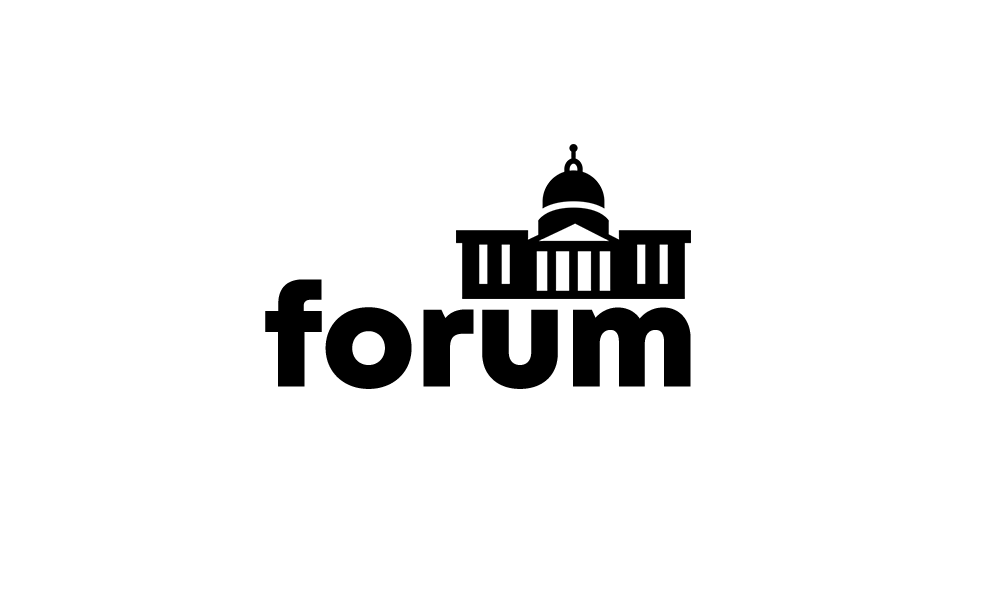
<style>
.page{position:relative;width:1000px;height:598px;background:#ffffff}
.page>*{position:absolute;margin:0}
.t1{font:141.5px "Mont-HeavyDEMO";color:#000000}
</style>
<div class="page">
<p class="t1" style="left:265px;top:279px;width:426px;height:110px">forum</p>
</div>
